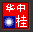
<style>
.page{position:relative;width:33px;height:32px;background:#f20000}
.page>*{position:absolute;margin:0}
.t1{font:10.4px "SimSun";color:#ffffff}
.t2{font:11.7px "SimSun";color:#ffffff}
</style>
<div class="page">
<p class="t1" style="left:6px;top:4px;width:19px;height:8px">华中</p>
<p class="t2" style="left:16px;top:15px;width:11px;height:12px">桂</p>
</div>
